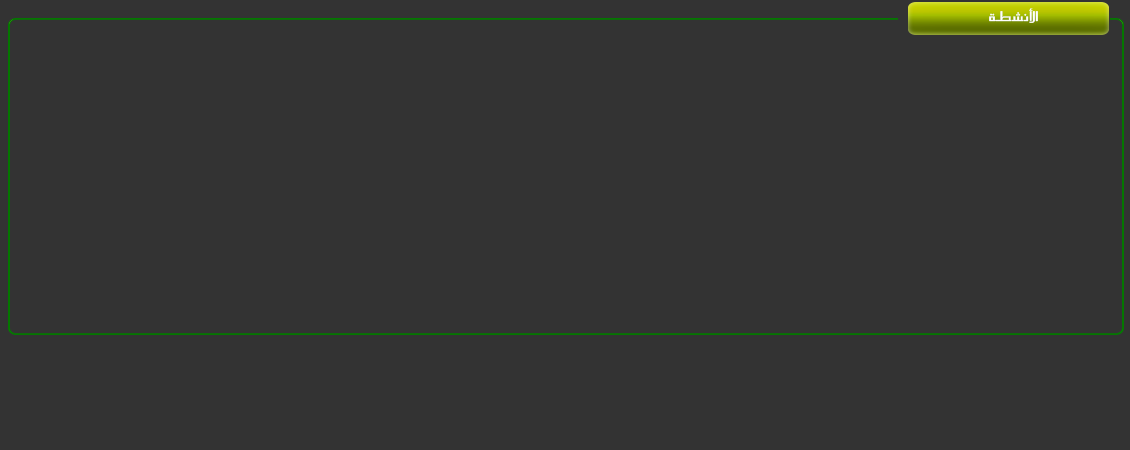
<style>
.page{position:relative;width:1130px;height:450px;background:#333333}
.page>*{position:absolute;margin:0}
.t1{font:16px "SC_KHALID";color:#fefefe;scale:1.07 1}
</style>
<div class="page">
<p class="t1" style="left:989px;top:8px;width:49px;height:15px">الأنشطـة</p>
</div>
